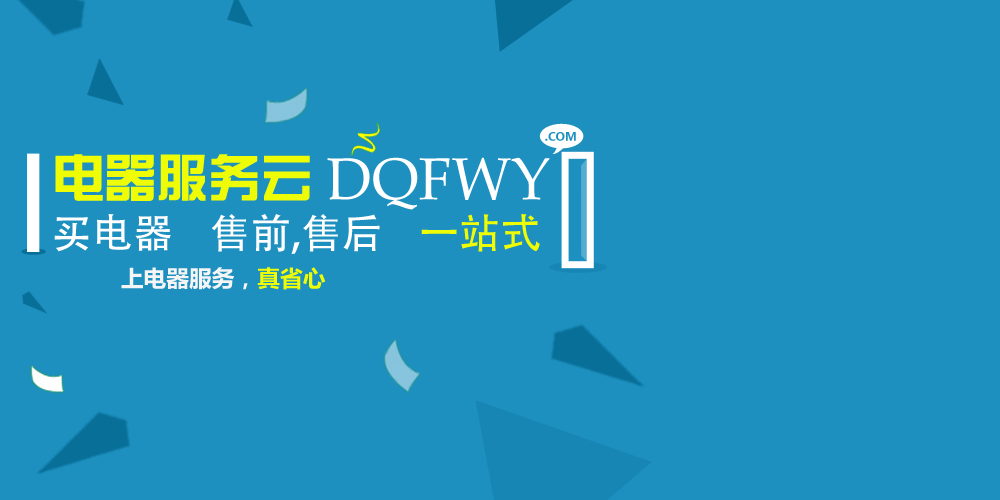
<style>
.page{position:relative;width:1000px;height:500px;background:#1d90bf}
.page>*{position:absolute;margin:0}
.t1{font:11.4px "MicrosoftYaHei-Bold";color:#1d90bf}
.t2{font:52px "FZZYK--GBK1-0";color:#eefd06}
.t3{font:59.4px "BookAntiqua";color:#ffffff}
.t4{font:40.7px "AdobeHeitiStd-Regular";color:#ffffff}
.t5{font:40.7px "AdobeHeitiStd-Regular";color:#eefd06}
.t6{font:22.7px "MicrosoftYaHei-Bold";color:#f5f5f5;text-transform:uppercase}
.t7{font:22.7px "MicrosoftYaHei-Bold";color:#eefd06;text-transform:uppercase}
</style>
<div class="page">
<p class="t1" style="left:545px;top:132px;width:31px;height:9px">.COM</p>
<p class="t2" style="left:55px;top:154px;width:255px;height:47px">电器服务云</p>
<p class="t3" style="left:327px;top:157px;width:223px;height:53px">DQFWY</p>
<p class="t4" style="left:54px;top:214px;width:486px;height:40px">买电器    售前,售后    <span class="t5">一站式</span></p>
<p class="t6" style="left:121px;top:267px;width:205px;height:23px">上电器服务，<span class="t7">真省心</span></p>
</div>
